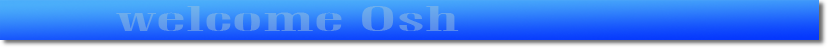
<style>
.page{position:relative;width:830px;height:50px}
.page>*{position:absolute;margin:0}
.t1{font:34.9px "Aa_-Oktom_-Vetren-B-Bold";color:#639dec;scale:2.43 1}
</style>
<div class="page">
<p class="t1" style="left:116px;top:6px;width:343px;height:25px">welcome Osh</p>
</div>
